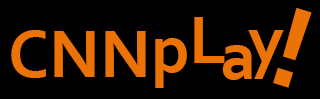
<style>
.page{position:relative;width:320px;height:99px;background:#000000}
.page>*{position:absolute;margin:0}
.t1{font:70px "Corbel-Bold";color:#ec7204}
.t2{font:120px "Corbel-Bold";color:#ec7204}
</style>
<div class="page">
<p class="t1" style="left:194px;top:17px;width:31px;height:46px">L</p>
<p class="t2" style="left:273px;top:7px;width:39px;height:81px;rotate:17deg">!</p>
<p class="t1" style="left:11px;top:30px;width:135px;height:48px">CNN</p>
<p class="t1" style="left:248px;top:30px;width:36px;height:49px">y</p>
<p class="t1" style="left:155px;top:38px;width:32px;height:50px">p</p>
<p class="t1" style="left:222px;top:45px;width:30px;height:35px">a</p>
</div>
